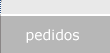
<style>
.page{position:relative;width:110px;height:53px;background:#b7b7b7}
.page>*{position:absolute;margin:0}
.t1{font:14px "Verdana";color:#ffffff}
</style>
<div class="page">
<p class="t1" style="left:26px;top:29px;width:53px;height:14px">pedidos</p>
</div>
